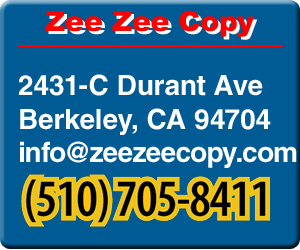
<style>
.page{position:relative;width:300px;height:250px;background:#005a93}
.page>*{position:absolute;margin:0}
.t1{font:28px "Arial-Black";color:#ff0000}
.t2{font:28px "Arial-Black"}
.t3{font:28px "Helvetica-Bold";color:#ffffff}
.t4{font:28px "Helvetica-Bold";letter-spacing:-0.025em;color:#ffffff}
</style>
<div class="page">
<p class="t1" style="left:45px;top:10px;width:210px;height:27px">Zee Zee Copy</p>
<p class="t2" style="left:48px;top:13px;width:210px;height:27px">Zee Zee Copy</p>
<p class="t3" style="left:18px;top:74px;width:279px;height:94px">2431-C Durant Ave<br>Berkeley, CA 94704<br><span class="t4">info@zeezeecopy.com</span></p>
</div>
